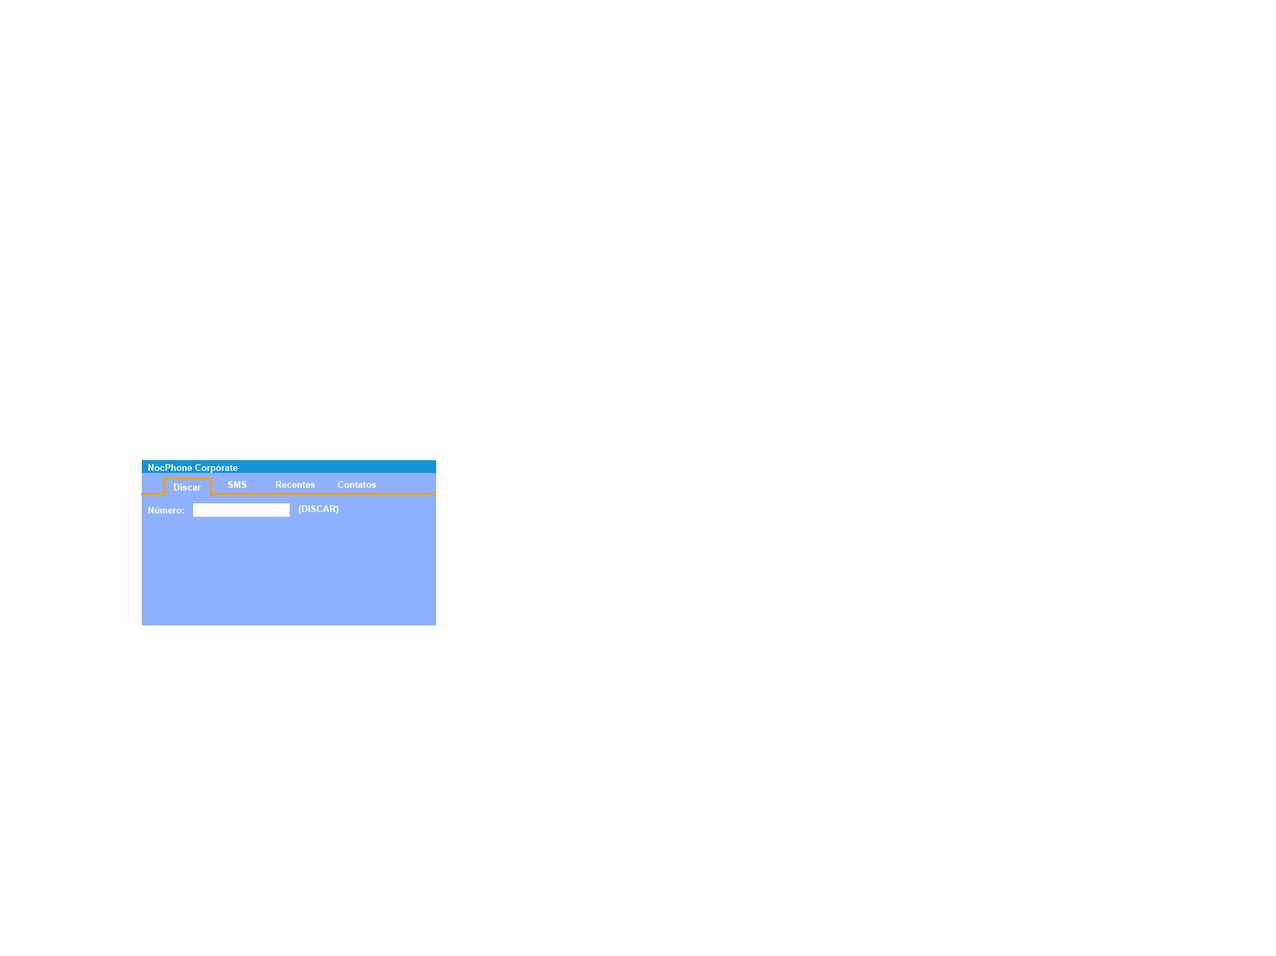
<style>
.page{position:relative;width:1276px;height:956px;background:#ffffff}
.page>*{position:absolute;margin:0}
.t1{font:9px "Arial-BoldMT";color:#fefefe}
.t2{font:9px "Arial-BoldMT";color:#ffffff}
</style>
<div class="page">
<p class="t1" style="left:148px;top:464px;width:90px;height:9px">NocPhone Corporate</p>
<p class="t2" style="left:173px;top:484px;width:28px;height:7px">Discar</p>
<p class="t2" style="left:227px;top:481px;width:20px;height:7px">SMS</p>
<p class="t2" style="left:275px;top:481px;width:40px;height:7px">Recentes</p>
<p class="t2" style="left:338px;top:481px;width:38px;height:7px">Contatos</p>
<p class="t1" style="left:148px;top:507px;width:36px;height:7px">Número:</p>
<p class="t2" style="left:298px;top:506px;width:41px;height:8px">(DISCAR)</p>
</div>
